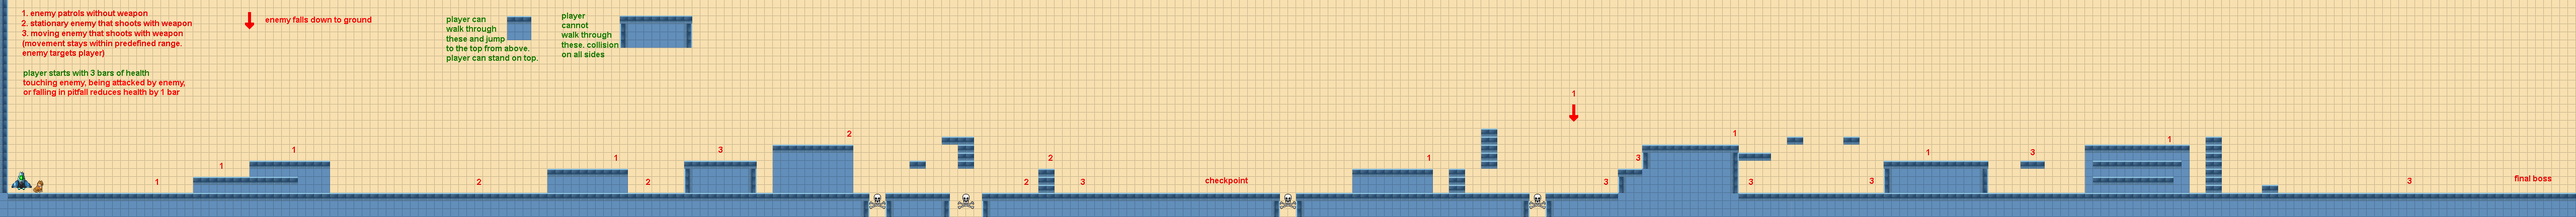
<style>
.page{position:relative;width:2576px;height:217px;background:#f8e0b0}
.page>*{position:absolute;margin:0}
.t1{font:8.1px "Arial-BoldMT";color:#ef0000}
.t2{font:8.1px "Arial-BoldMT";color:#ff0000}
.t3{font:8.1px "Arial-BoldMT";color:#1a7d00}
</style>
<div class="page">
<p class="t1" style="left:22px;top:10px;width:125px;height:8px">1. enemy patrols without weapon</p>
<p class="t2" style="left:266px;top:17px;width:105px;height:7px">enemy falls down to ground</p>
<p class="t3" style="left:446px;top:16px;width:92px;height:46px">player can<br>walk through <br>these and jump<br>to the top from above.<br>player can stand on top.</p>
<p class="t3" style="left:561px;top:13px;width:57px;height:44px">player<br>cannot<br>walk through<br>these. collision<br>on all sides</p>
<p class="t1" style="left:22px;top:20px;width:170px;height:8px">2. stationary enemy that shoots with weapon</p>
<p class="t1" style="left:22px;top:30px;width:161px;height:27px">3. moving enemy that shoots with weapon (movement stays within predefined range. enemy targets player)</p>
<p class="t2" style="left:23px;top:70px;width:162px;height:27px"><span class="t3">player starts with 3 bars of health<br></span>touching enemy, being attacked by enemy,<br>or falling in pitfall reduces health by 1 bar</p>
<p class="t1" style="left:1572px;top:91px;width:3px;height:6px">1</p>
<p class="t1" style="left:847px;top:131px;width:4px;height:6px">2</p>
<p class="t1" style="left:1733px;top:130px;width:3px;height:6px">1</p>
<p class="t1" style="left:2168px;top:136px;width:2px;height:6px">1</p>
<p class="t1" style="left:292px;top:147px;width:3px;height:6px">1</p>
<p class="t1" style="left:718px;top:147px;width:4px;height:6px">3</p>
<p class="t1" style="left:1926px;top:149px;width:3px;height:6px">1</p>
<p class="t1" style="left:2031px;top:149px;width:4px;height:6px">3</p>
<p class="t1" style="left:614px;top:155px;width:3px;height:6px">1</p>
<p class="t1" style="left:1049px;top:155px;width:4px;height:6px">2</p>
<p class="t1" style="left:1427px;top:155px;width:3px;height:6px">1</p>
<p class="t1" style="left:1636px;top:155px;width:4px;height:6px">3</p>
<p class="t1" style="left:220px;top:163px;width:2px;height:6px">1</p>
<p class="t1" style="left:155px;top:179px;width:3px;height:6px">1</p>
<p class="t1" style="left:477px;top:179px;width:4px;height:6px">2</p>
<p class="t1" style="left:646px;top:179px;width:4px;height:6px">2</p>
<p class="t1" style="left:1024px;top:179px;width:4px;height:6px">2</p>
<p class="t1" style="left:1081px;top:179px;width:4px;height:6px">3</p>
<p class="t1" style="left:1205px;top:178px;width:43px;height:7px">checkpoint</p>
<p class="t1" style="left:1604px;top:179px;width:4px;height:6px">3</p>
<p class="t1" style="left:1749px;top:179px;width:4px;height:6px">3</p>
<p class="t1" style="left:1870px;top:178px;width:4px;height:6px">3</p>
<p class="t1" style="left:2407px;top:178px;width:4px;height:6px">3</p>
<p class="t1" style="left:2515px;top:176px;width:36px;height:6px">final boss</p>
</div>
